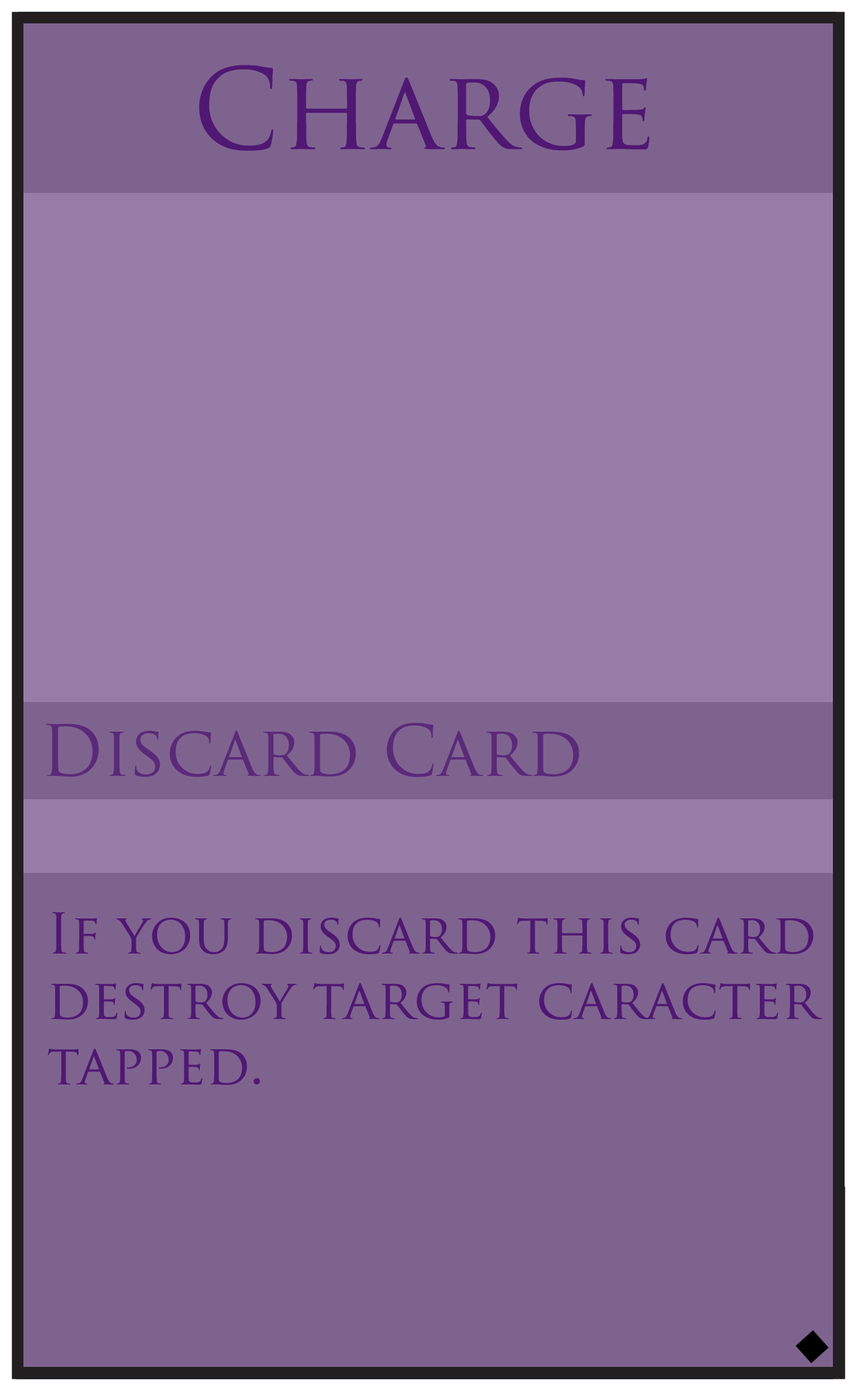
<style>
.page{position:relative;width:857px;height:1391px;background:#7e638f}
.page>*{position:absolute;margin:0}
.t1{font:109.1px "TrajanPro-Regular";color:#4f1872}
.t2{font:68.9px "TrajanPro-Regular";color:#5a2a79}
.t3{font:54.5px "TrajanPro-Regular";color:#4f1872}
</style>
<div class="page">
<p class="t1" style="left:199px;top:65px;width:451px;height:86px">Charge</p>
<p class="t2" style="left:46px;top:723px;width:533px;height:54px">Discard Card</p>
<p class="t3" style="left:48px;top:912px;width:775px;height:173px">If you discard this card <br>destroy target caracter<br>tapped.</p>
</div>
